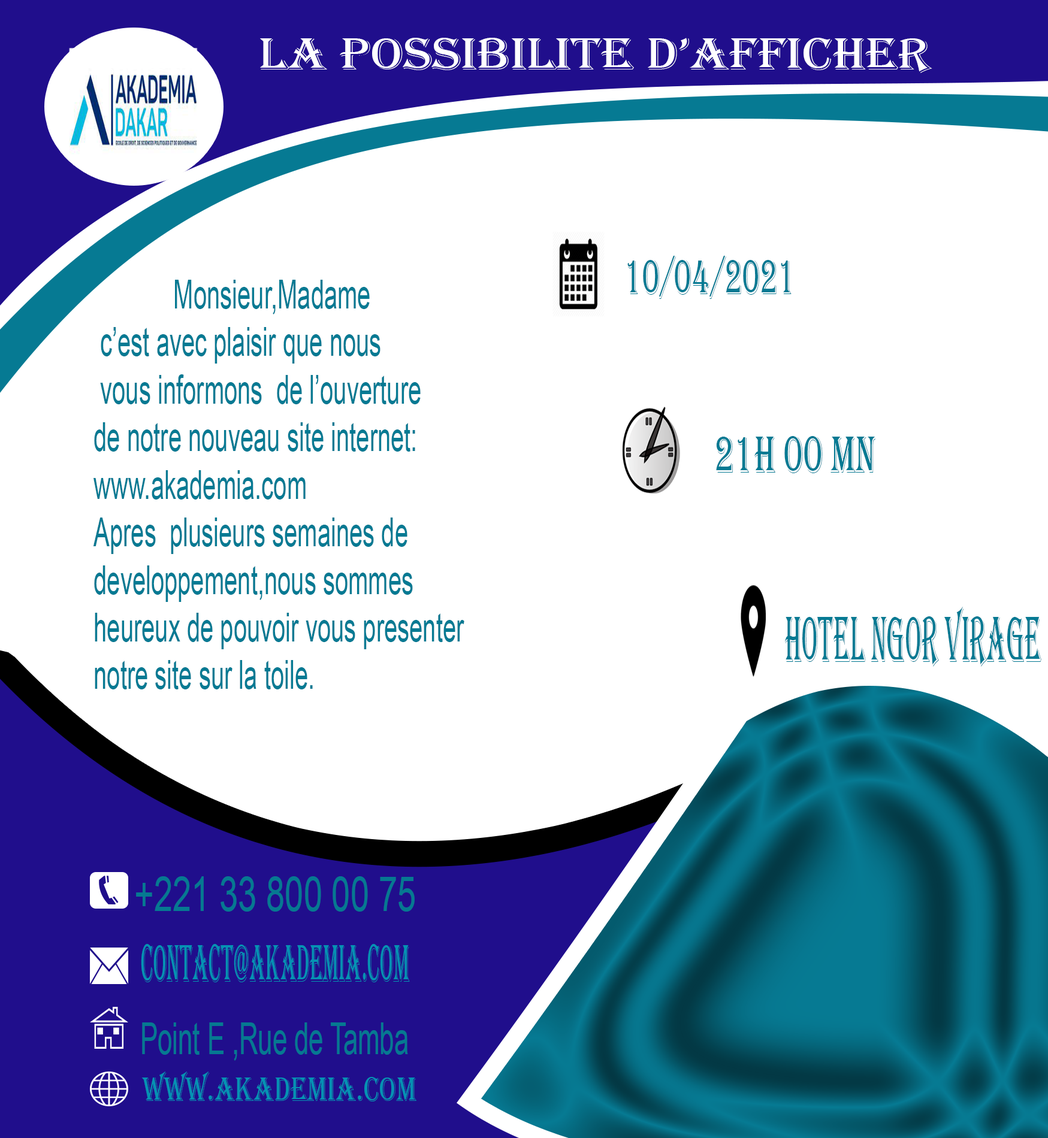
<style>
.page{position:relative;width:1048px;height:1138px;background:#ffffff}
.page>*{position:absolute;margin:0}
.t1{font:35.1px "Algerian";color:#ffffff;scale:1.11 1}
.t2{font:51px "Algerian";color:#067a93;scale:0.59 1}
.t3{font:39.7px "ArialMT";color:#067a93;scale:0.6 1}
.t4{font:40.3px "Algerian";color:#067a93;scale:0.62 1}
.t5{font:50.1px "Algerian";color:#067a93;scale:0.4 1}
.t6{font:36.1px "ArialMT";color:#067992;scale:0.7 1}
.t7{font:41.1px "Algerian";color:#0592b3;scale:0.39 1}
.t8{font:33px "ArialMT";color:#067992;scale:0.59 1}
.t9{font:26.1px "Algerian";color:#0592b3;scale:0.78 1}
</style>
<div class="page">
<p class="t1" style="left:260px;top:38px;width:672px;height:35px">LA POSSIBILITE D’AFFICHER</p>
<p class="t2" style="left:627px;top:256px;width:164px;height:43px">10/04/2021</p>
<p class="t3" style="left:93px;top:280px;width:371px;height:409px">Monsieur,Madame<br> c’est avec plaisir que nous<br> vous informons  de l’ouverture <br>de notre nouveau site internet:<br>www.akademia.com <br>Apres  plusieurs semaines de <br>developpement,nous sommes<br>heureux de pouvoir vous presenter<br>notre site sur la toile.</p>
<p class="t4" style="left:716px;top:436px;width:160px;height:37px">21H 00 MN</p>
<p class="t5" style="left:785px;top:607px;width:256px;height:60px">Hotel Ngor Virage</p>
<p class="t6" style="left:136px;top:876px;width:279px;height:36px">+221 33 800 00 75</p>
<p class="t7" style="left:141px;top:944px;width:269px;height:38px">contact@akademia.com</p>
<p class="t8" style="left:142px;top:1023px;width:266px;height:38px">Point E ,Rue de Tamba</p>
<p class="t9" style="left:141px;top:1072px;width:275px;height:30px">www.akademia.com</p>
</div>
